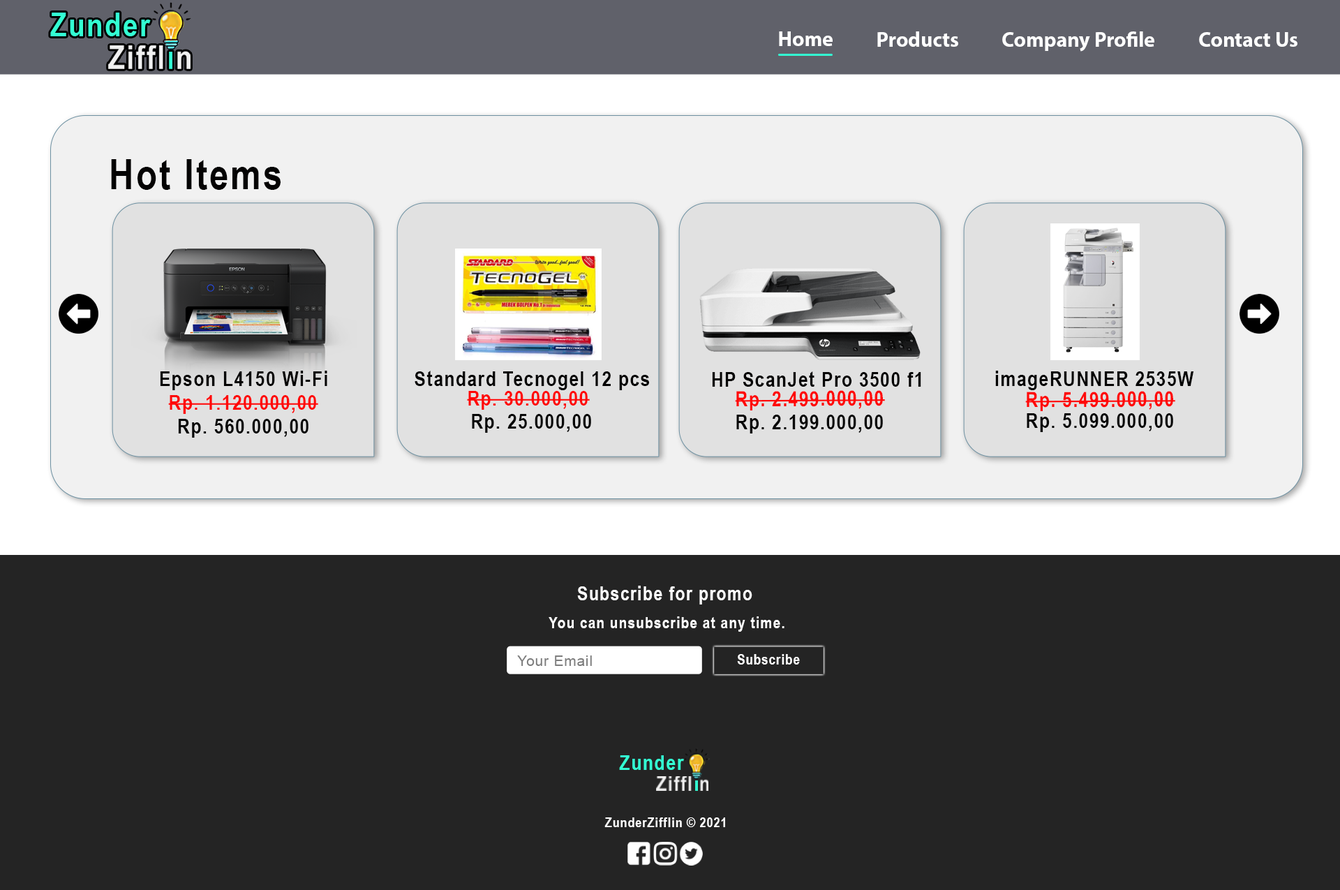
<style>
.page{position:relative;width:1340px;height:890px;background:#242424}
.page>*{position:absolute;margin:0}
.t1{font:33px "ArialNarrow-Bold";letter-spacing:0.05em;color:#33ffd3}
.t2{font:21px "MyriadPro-Bold";color:#ffffff}
.t3{font:41.9px "ArialNarrow-Bold";letter-spacing:0.05em;color:#040303}
.t4{font:20.9px "ArialNarrow-Bold";letter-spacing:0.05em;color:#040303}
.t5{font:20.9px "ArialNarrow-Bold";letter-spacing:0.05em;color:#ff0808}
.t6{font:20.9px "ArialNarrow-Bold";letter-spacing:0.05em;color:#060606}
.t7{font:19.5px "ArialNarrow-Bold";letter-spacing:0.05em;color:#ffffff}
.t8{font:16.3px "ArialNarrow-Bold";letter-spacing:0.05em;color:#ffffff}
.t9{font:14.3px "ArialNarrow-Bold";letter-spacing:0.05em;color:#ffffff}
.t10{font:14.3px "ArialMT";letter-spacing:0.05em;color:#7d7d7d}
.t11{font:21.1px "ArialNarrow-Bold";letter-spacing:0.05em;color:#33ffd3}
.t12{font:13.8px "ArialNarrow-Bold";letter-spacing:0.05em;color:#ffffff}
</style>
<div class="page">
<p class="t1" style="left:50px;top:13px;width:101px;height:23px">Zunder</p>
<p class="t2" style="left:779px;top:31px;width:54px;height:15px">Home</p>
<p class="t2" style="left:877px;top:31px;width:81px;height:16px">Products</p>
<p class="t2" style="left:1002px;top:31px;width:152px;height:21px">Company Profile</p>
<p class="t2" style="left:1199px;top:32px;width:98px;height:15px">Contact Us</p>
<p class="t3" style="left:111px;top:159px;width:170px;height:31px">Hot Items</p>
<p class="t4" style="left:160px;top:371px;width:167px;height:19px">Epson L4150 Wi-Fi</p>
<p class="t4" style="left:415px;top:371px;width:234px;height:19px">Standard Tecnogel 12 pcs</p>
<p class="t4" style="left:712px;top:371px;width:209px;height:16px">HP ScanJet Pro 3500 f1</p>
<p class="t4" style="left:995px;top:371px;width:199px;height:19px">imageRUNNER 2535W</p>
<p class="t5" style="left:168px;top:395px;width:150px;height:19px">Rp. 1.120.000,00</p>
<p class="t5" style="left:467px;top:391px;width:123px;height:19px">Rp. 30.000,00</p>
<p class="t5" style="left:735px;top:390px;width:150px;height:20px">Rp. 2.499.000,00</p>
<p class="t5" style="left:1025px;top:391px;width:150px;height:20px">Rp. 5.499.000,00</p>
<p class="t6" style="left:472px;top:414px;width:119px;height:19px">Rp. 25.000,00</p>
<p class="t6" style="left:1027px;top:413px;width:146px;height:19px">Rp. 5.099.000,00</p>
<p class="t6" style="left:178px;top:419px;width:130px;height:19px">Rp. 560.000,00</p>
<p class="t6" style="left:736px;top:415px;width:147px;height:18px">Rp. 2.199.000,00</p>
<p class="t7" style="left:577px;top:586px;width:175px;height:18px">Subscribe for promo</p>
<p class="t8" style="left:549px;top:616px;width:235px;height:16px">You can unsubscribe at any time.</p>
<p class="t9" style="left:737px;top:654px;width:63px;height:10px">Subscribe</p>
<p class="t10" style="left:517px;top:655px;width:75px;height:11px">Your Email</p>
<p class="t11" style="left:619px;top:755px;width:65px;height:15px">Zunder</p>
<p class="t12" style="left:604px;top:817px;width:121px;height:10px">ZunderZifflin © 2021</p>
</div>
